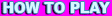
<style>
.page{position:relative;width:112px;height:16px;background:#ff00ff}
.page>*{position:absolute;margin:0}
.t1{font:14.7px "Arial-Black";color:#d6f7ff;scale:0.95 1}
</style>
<div class="page">
<p class="t1" style="left:3px;top:2px;width:107px;height:11px">HOW TO PLAY</p>
</div>
